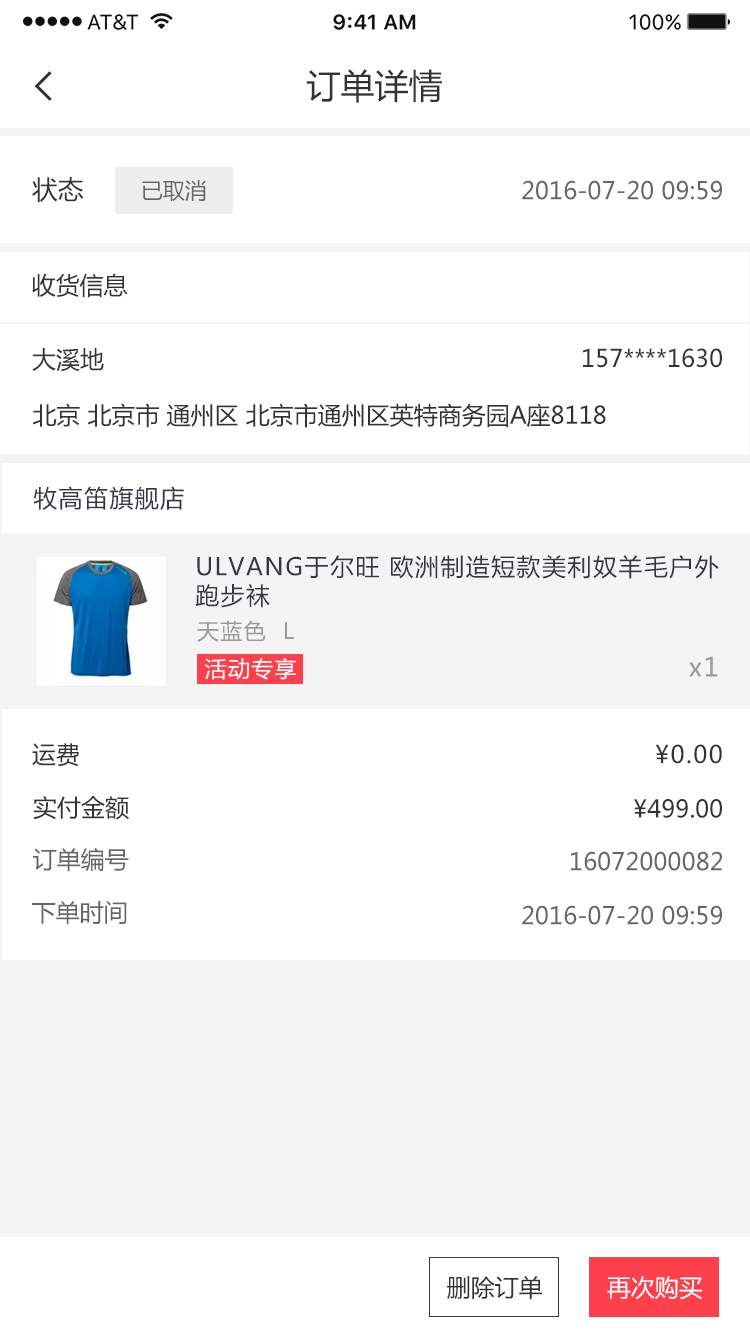
<style>
.page{position:relative;width:750px;height:1334px;background:#ffffff}
.page>*{position:absolute;margin:0}
.t1{font:34px "MicrosoftYaHei";color:#333333}
.t2{font:26px "MicrosoftYaHei";color:#333333}
.t3{font:22px "MicrosoftYaHei";color:#666666}
.t4{font:24px "MicrosoftYaHei";color:#666666}
.t5{font:24px "MicrosoftYaHei";color:#333333}
.t6{font:24px "MicrosoftYaHei";letter-spacing:0.06em;color:#343843}
.t7{font:22px "MicrosoftYaHei";letter-spacing:0.06em;color:#999999}
.t8{font:22px "MicrosoftYaHei";letter-spacing:0.06em;color:#ffffff}
.t9{font:26px "MicrosoftYaHei";letter-spacing:0.06em;color:#999999}
.t10{font:24px "MicrosoftYaHei";letter-spacing:0.06em;color:#333333}
.t11{font:24px "MicrosoftYaHei";color:#ffffff}
</style>
<div class="page">
<p class="t1" style="left:306px;top:69px;width:136px;height:34px">订单详情</p>
<p class="t2" style="left:32px;top:177px;width:52px;height:26px">状态</p>
<p class="t3" style="left:142px;top:180px;width:64px;height:21px">已取消</p>
<p class="t4" style="left:522px;top:180px;width:200px;height:20px">2016-07-20 09:59</p>
<p class="t5" style="left:32px;top:273px;width:96px;height:25px">收货信息</p>
<p class="t5" style="left:32px;top:348px;width:72px;height:24px">大溪地</p>
<p class="t5" style="left:583px;top:348px;width:139px;height:20px">157****1630</p>
<p class="t5" style="left:32px;top:403px;width:574px;height:25px">北京 北京市 通州区 北京市通州区英特商务园A座8118</p>
<p class="t6" style="left:33px;top:486px;width:151px;height:24px">牧高笛旗舰店</p>
<p class="t6" style="left:195px;top:555px;width:524px;height:53px">ULVANG于尔旺 欧洲制造短款美利奴羊毛户外跑步袜</p>
<p class="t7" style="left:197px;top:620px;width:97px;height:22px">天蓝色  L</p>
<p class="t8" style="left:204px;top:658px;width:92px;height:22px">活动专享</p>
<p class="t9" style="left:689px;top:656px;width:29px;height:21px">x1</p>
<p class="t5" style="left:32px;top:743px;width:47px;height:24px">运费</p>
<p class="t10" style="left:655px;top:744px;width:67px;height:20px">¥0.00</p>
<p class="t5" style="left:33px;top:796px;width:96px;height:24px">实付金额</p>
<p class="t5" style="left:634px;top:799px;width:88px;height:19px">¥499.00</p>
<p class="t4" style="left:33px;top:848px;width:96px;height:24px">订单编号</p>
<p class="t4" style="left:571px;top:851px;width:151px;height:20px">16072000082</p>
<p class="t4" style="left:32px;top:901px;width:95px;height:24px">下单时间</p>
<p class="t4" style="left:522px;top:905px;width:200px;height:20px">2016-07-20 09:59</p>
<p class="t5" style="left:447px;top:1276px;width:96px;height:24px">删除订单</p>
<p class="t11" style="left:607px;top:1276px;width:95px;height:24px">再次购买</p>
</div>
